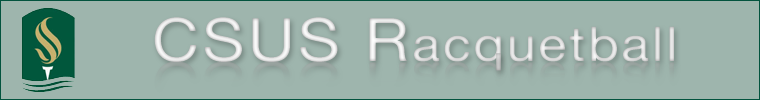
<style>
.page{position:relative;width:760px;height:100px;background:#9eb5ad}
.page>*{position:absolute;margin:0}
.t1{font:48px "HelveticaNeue";letter-spacing:0.05em;color:#e2e2e2;scale:1.08 1}
.t2{font:60px "HelveticaNeue";letter-spacing:0.05em;color:#e2e2e2;scale:1.08 1}
</style>
<div class="page">
<p class="t1" style="left:154px;top:17px;width:520px;height:54px"><span class="t2">CSUS R</span>acquetball</p>
</div>
